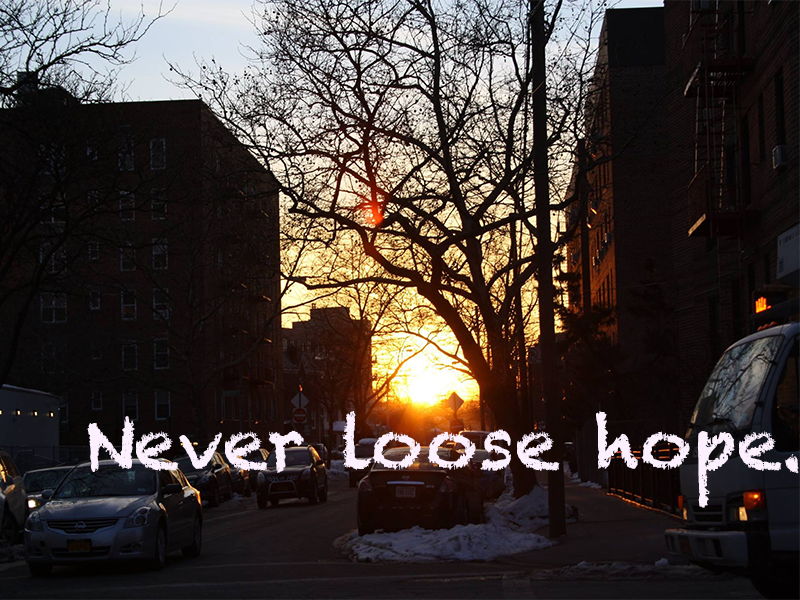
<style>
.page{position:relative;width:800px;height:600px}
.page>*{position:absolute;margin:0}
.t1{font:72px "Chalkduster";color:#fcf0ff}
</style>
<div class="page">
<p class="t1" style="left:87px;top:411px;width:712px;height:97px">Never loose hope.</p>
</div>
